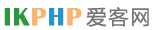
<style>
.page{position:relative;width:155px;height:30px;background:#ffffff}
.page>*{position:absolute;margin:0}
.t1{font:20px "MicrosoftYaHei";letter-spacing:0.1em;color:#767676}
.t2{font:26px "BritannicBold";letter-spacing:0.05em;color:#2e963d}
.t3{font:26px "BritannicBold";letter-spacing:0.05em;color:#f7b56d}
.t4{font:26px "BritannicBold";letter-spacing:0.05em;color:#2496cd}
</style>
<div class="page">
<p class="t1" style="left:86px;top:6px;width:63px;height:21px">爱客网</p>
<p class="t2" style="left:4px;top:8px;width:78px;height:18px">IK<span class="t3">P</span><span class="t4">H</span><span class="t3">P</span></p>
</div>
